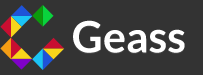
<style>
.page{position:relative;width:203px;height:75px;background:#333333}
.page>*{position:absolute;margin:0}
.t1{font:43px "Lato-Bold";color:#ffffff}
</style>
<div class="page">
<p class="t1" style="left:73px;top:20px;width:112px;height:33px">Geass</p>
</div>
